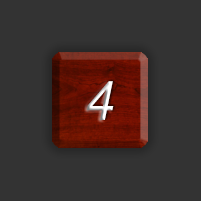
<style>
.page{position:relative;width:201px;height:201px;background:#333333}
.page>*{position:absolute;margin:0}
.t1{font:54px "Arial-ItalicMT";letter-spacing:-0.06em}
</style>
<div class="page">
<p class="t1" style="left:86px;top:81px;width:28px;height:39px">4</p>
</div>
